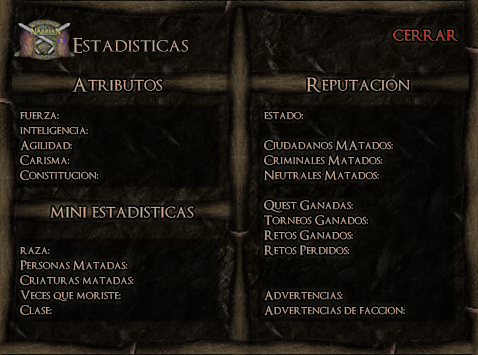
<style>
.page{position:relative;width:478px;height:355px}
.page>*{position:absolute;margin:0}
.t1{font:19.3px "OptimusPrinceps";color:#ce1413}
.t2{font:20.4px "OptimusPrinceps";color:#d2a58e;scale:1.09 1}
.t3{font:19.3px "OptimusPrinceps";color:#d1a48e}
.t4{font:19.3px "OptimusPrinceps";color:#d3a78f}
.t5{font:12.5px "OptimusPrinceps"}
.t6{font:12.5px "OptimusPrinceps";color:#d0a38c}
.t7{font:19.3px "OptimusPrinceps";color:#d4a890}
</style>
<div class="page">
<p class="t1" style="left:393px;top:29px;width:65px;height:12px">cerrar</p>
<p class="t2" style="left:72px;top:37px;width:117px;height:17px">Estadisticas</p>
<p class="t3" style="left:72px;top:77px;width:91px;height:16px">Atributos</p>
<p class="t4" style="left:306px;top:77px;width:104px;height:16px">Reputacion</p>
<p class="t5" style="left:20px;top:112px;width:114px;height:204px">fuerza:<br>inteligencia:<br>Agilidad:<br>Carisma:<br>Constitucion:<br><br><br><br><br>raza:<br>Personas Matadas:<br>Criaturas matadas:<br>Veces que moriste:<br>Clase:</p>
<p class="t6" style="left:264px;top:111px;width:141px;height:205px">estado:<br><br>Ciudadanos MAtados:<br>Criminales Matados:<br>Neutrales Matados:<br><br>Quest Ganadas:<br>Torneos Ganados:<br>Retos Ganados:<br>Retos Perdidos:<br><br><br>Advertencias:<br>Advertencias de faccion:</p>
<p class="t7" style="left:50px;top:206px;width:144px;height:12px">mini estadisticas</p>
</div>
